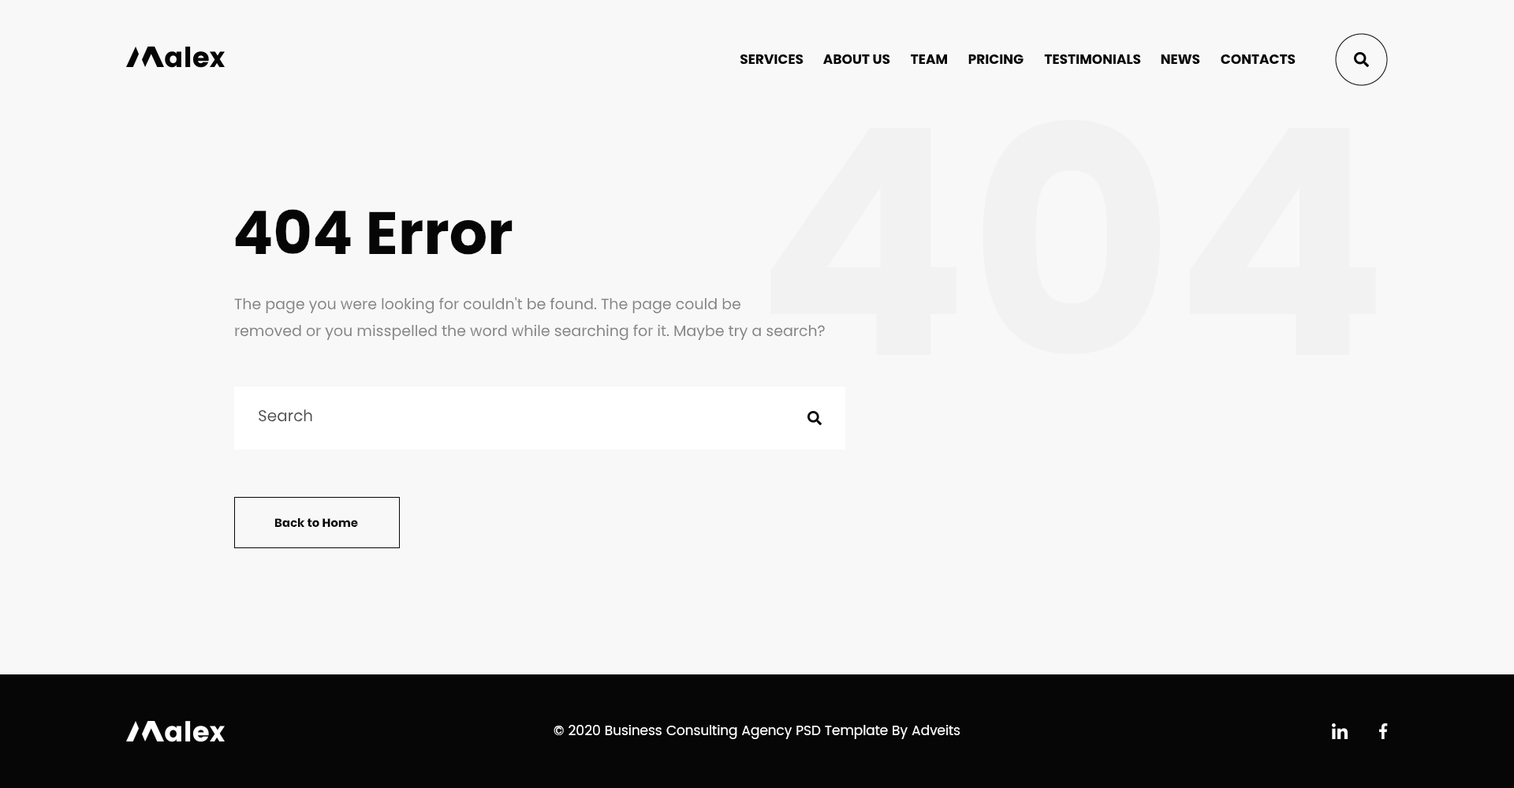
<style>
.page{position:relative;width:1514px;height:788px;background:#f8f8f8}
.page>*{position:absolute;margin:0}
.t1{font:13.4px "Poppins-Bold";color:#060606}
.t2{font:315.4px "Poppins-Bold";color:#f2f2f2}
.t3{font:59.9px "Poppins-Bold";color:#060606}
.t4{font:15px/26.8px "Poppins-Regular";color:#828282}
.t5{font:15.8px "Poppins-Regular";color:#4c4c4c}
.t6{font:11.8px "Poppins-Bold";color:#060606}
.t7{font:13.4px "Poppins-Regular";color:#ffffff}
</style>
<div class="page">
<p class="t1" style="left:740px;top:54px;width:63px;height:10px">SERVICES</p>
<p class="t1" style="left:823px;top:54px;width:67px;height:10px">ABOUT US</p>
<p class="t1" style="left:911px;top:54px;width:36px;height:10px">TEAM</p>
<p class="t1" style="left:968px;top:54px;width:55px;height:10px">PRICING</p>
<p class="t1" style="left:1044px;top:54px;width:97px;height:10px">TESTIMONIALS</p>
<p class="t1" style="left:1161px;top:54px;width:39px;height:10px">NEWS</p>
<p class="t1" style="left:1221px;top:54px;width:74px;height:10px">CONTACTS</p>
<p class="t2" style="left:770px;top:120px;width:606px;height:235px">404</p>
<p class="t3" style="left:235px;top:209px;width:278px;height:46px">404 Error</p>
<p class="t4" style="left:234px;top:296px;width:591px;height:45px">The page you were looking for couldn't be found. The page could be<br>removed or you misspelled the word while searching for it. Maybe try a search?</p>
<p class="t5" style="left:259px;top:409px;width:53px;height:13px">Search</p>
<p class="t6" style="left:275px;top:518px;width:83px;height:9px">Back to Home</p>
<p class="t7" style="left:554px;top:725px;width:406px;height:14px">© 2020 Business Consulting Agency PSD Template By Adveits</p>
</div>
